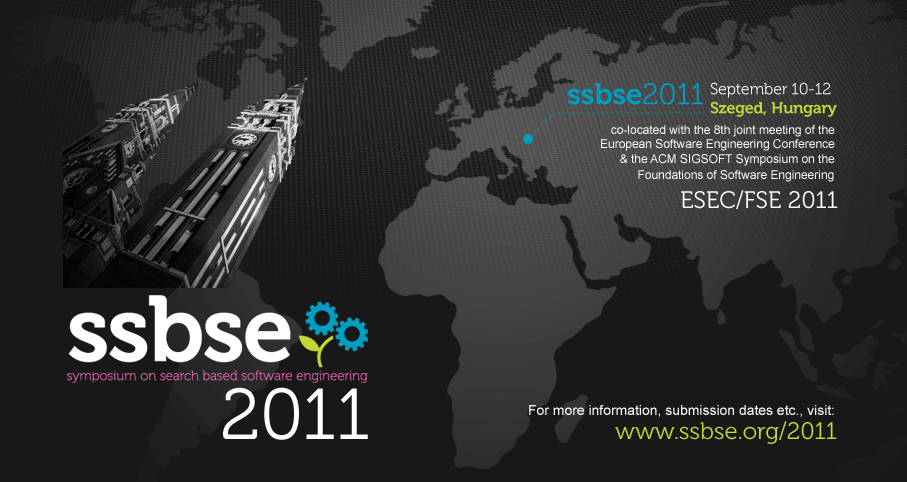
<style>
.page{position:relative;width:907px;height:482px;background:#181818}
.page>*{position:absolute;margin:0}
.t1{font:12px "ArialMT";color:#ffffff}
.t2{font:13.9px "Museo-300";color:#ffffff}
.t3{font:23.9px "Museo-300";color:#ffffff}
.t4{font:71.7px "Museo-300";color:#ffffff}
.t5{font:13.9px "ArialMT";color:#ffffff}
.t6{font:23.9px "Museo-300";color:#c3d833}
</style>
<div class="page">
<p class="t1" style="left:601px;top:125px;width:237px;height:84px;text-align:right">co-located with the 8th joint meeting of the <br>European Software Engineering Conference <br>&amp; the ACM SIGSOFT Symposium on the <br>Foundations of Software Engineering<span class="t2"> <br></span><span class="t3">ESEC/FSE 2011</span></p>
<p class="t4" style="left:223px;top:387px;width:145px;height:53px">2011</p>
<p class="t5" style="left:529px;top:405px;width:305px;height:12px">For more information, submission dates etc., visit:</p>
<p class="t6" style="left:615px;top:421px;width:222px;height:23px">www.ssbse.org/2011</p>
</div>
